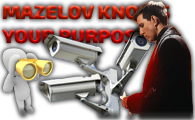
<style>
.page{position:relative;width:195px;height:120px}
.page>*{position:absolute;margin:0}
.t1{font:19.4px "Exo2-Black"}
</style>
<div class="page">
<p class="t1" style="left:2px;top:5px;width:168px;height:39px">MAZELOV KNOWS<br>YOUR PURPOSE</p>
</div>
